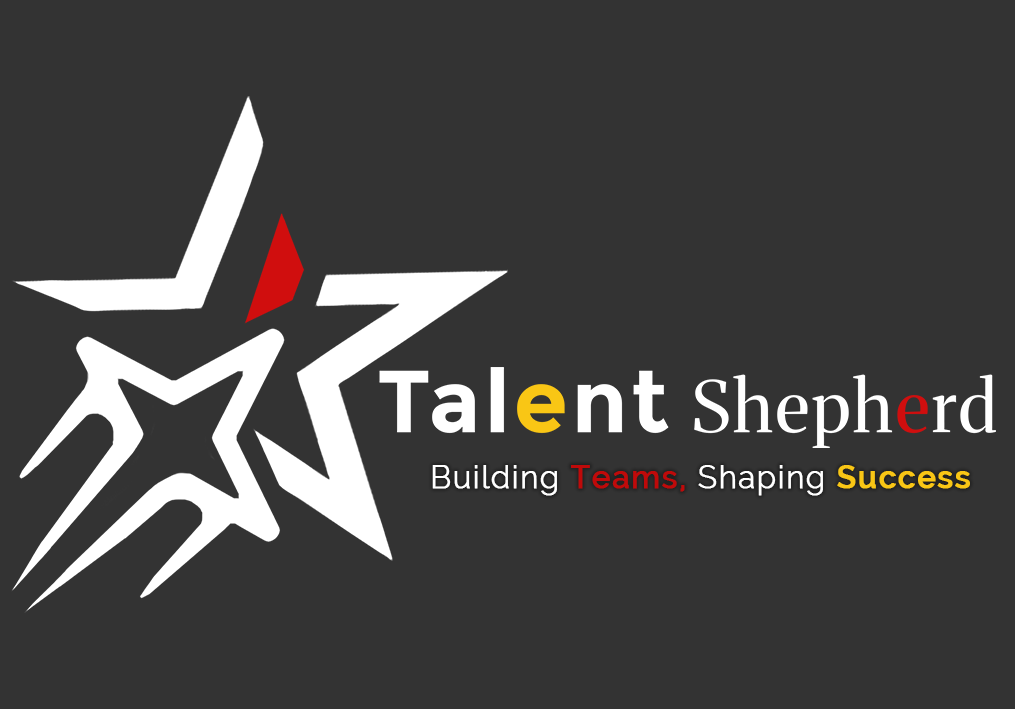
<style>
.page{position:relative;width:1015px;height:709px;background:#333333}
.page>*{position:absolute;margin:0}
.t1{font:30.8px "Raleway-Light";letter-spacing:0.04em;color:#ffffff;font-weight:bold}
.t2{font:30.8px "Raleway-Medium";letter-spacing:0.04em;color:#bf0a0a;font-weight:bold}
.t3{font:30.8px "Raleway-SemiBold";letter-spacing:0.04em;color:#f9c615;font-weight:bold}
</style>
<div class="page">
<p class="t1" style="left:432px;top:465px;width:538px;height:31px">Building <span class="t2">Teams, </span>Shaping <span class="t3">Success</span></p>
</div>
